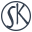
<style>
.page{position:relative;width:32px;height:32px;background:#ffffff}
.page>*{position:absolute;margin:0}
.t1{font:32.5px "Herculanum";color:#35404f}
.t2{font:34.9px "Herculanum";color:#35404f;scale:0.52 1}
</style>
<div class="page">
<p class="t1" style="left:6px;top:6px;width:10px;height:22px">S</p>
<p class="t2" style="left:16px;top:3px;width:13px;height:22px">K</p>
</div>
